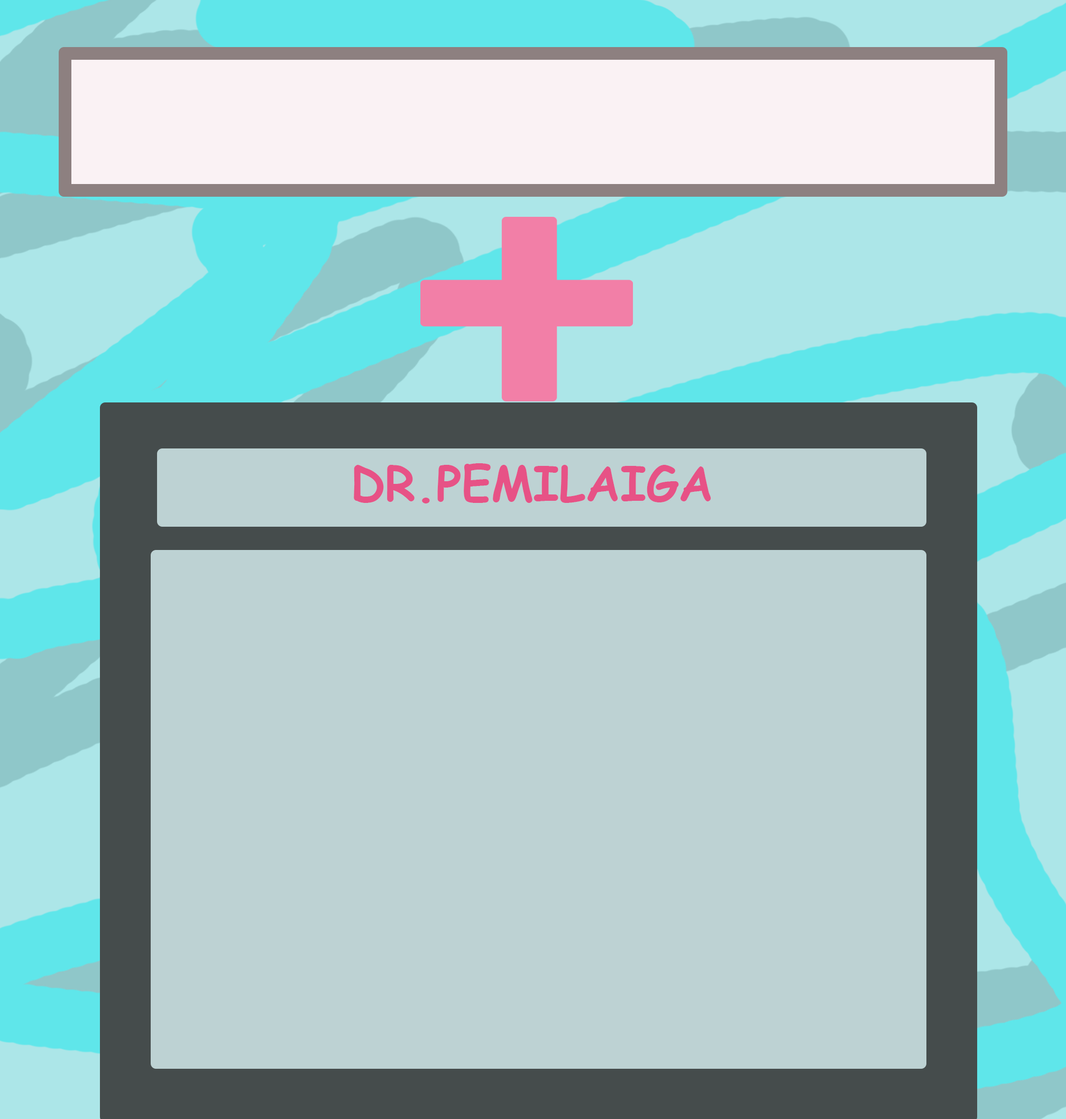
<style>
.page{position:relative;width:1066px;height:1119px;background:#bdd2d3}
.page>*{position:absolute;margin:0}
.t1{font:47.6px "ComicSansMS-Bold";color:#e75286}
</style>
<div class="page">
<p class="t1" style="left:354px;top:463px;width:357px;height:40px">DR.PEMILAIGA</p>
</div>
